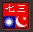
<style>
.page{position:relative;width:33px;height:32px;background:#f20000}
.page>*{position:absolute;margin:0}
.t1{font:10.4px "SimSun";color:#ffffff}
</style>
<div class="page">
<p class="t1" style="left:5px;top:4px;width:20px;height:8px">七三</p>
</div>
